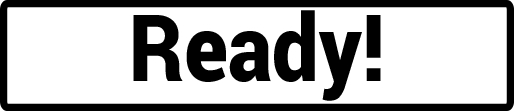
<style>
.page{position:relative;width:515px;height:111px;background:#ffffff}
.page>*{position:absolute;margin:0}
.t1{font:92.6px "Roboto-Black";color:#000000;scale:0.9 1}
</style>
<div class="page">
<p class="t1" style="left:133px;top:10px;width:248px;height:91px">Ready!</p>
</div>
